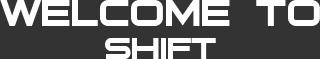
<style>
.page{position:relative;width:320px;height:59px;background:#333333}
.page>*{position:absolute;margin:0}
.t1{font:50px "Bitsumishi";color:#ffffff}
.t2{font:41.7px "Bitsumishi";color:#ffffff}
</style>
<div class="page">
<p class="t1" style="left:0px;top:0px;width:320px;height:26px">welcome to</p>
<p class="t2" style="left:105px;top:38px;width:111px;height:21px">shift</p>
</div>
